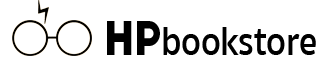
<style>
.page{position:relative;width:320px;height:62px;background:#ffffff}
.page>*{position:absolute;margin:0}
.t1{font:42.2px "SukhumvitSet-SemiBold";color:#000000;scale:0.84 1}
.t2{font:45.8px "BigJohn";color:#000000;scale:0.84 1}
</style>
<div class="page">
<p class="t1" style="left:107px;top:21px;width:209px;height:34px"><span class="t2">hp</span>bookstore</p>
</div>
